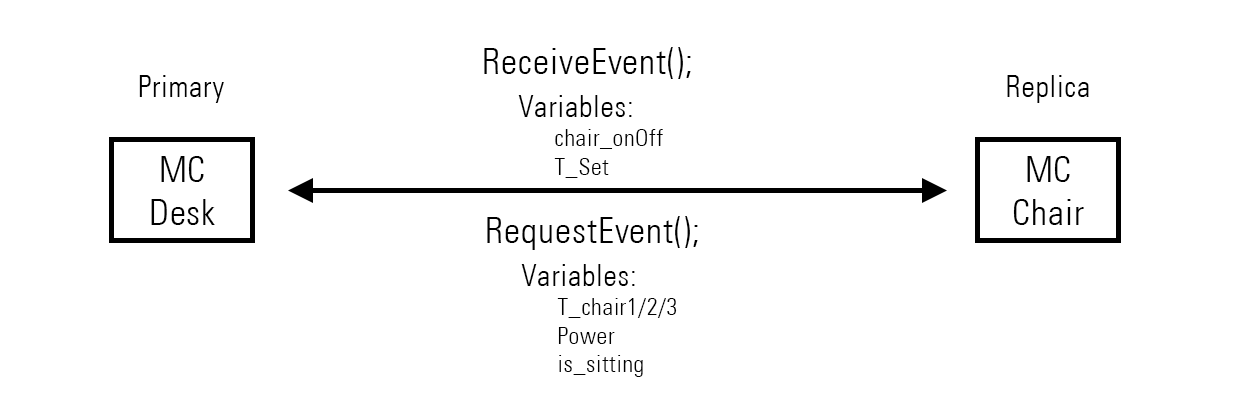
<style>
.page{position:relative;width:1249px;height:405px;background:#ffffff}
.page>*{position:absolute;margin:0}
.t1{font:24px "UniversLT-CondensedLight";letter-spacing:0.025em;color:#000000}
.t2{font:36px "UniversLT-CondensedLight";letter-spacing:0.025em;color:#000000}
.t3{font:30px "UniversLT-CondensedLight";letter-spacing:0.025em;color:#000000}
</style>
<div class="page">
<p class="t1" style="left:484px;top:47px;width:207px;height:131px"><span class="t2">ReceiveEvent();<br></span><span class="t3"> Variables: <br></span>  chair_onOff<br>  T_Set</p>
<p class="t3" style="left:139px;top:75px;width:85px;height:28px">Primary</p>
<p class="t3" style="left:1007px;top:75px;width:82px;height:28px">Replica</p>
<p class="t2" style="left:151px;top:156px;width:64px;height:69px;text-align:center">MC<br>Desk</p>
<p class="t2" style="left:1013px;top:156px;width:71px;height:69px;text-align:center">MC<br>Chair</p>
<p class="t1" style="left:487px;top:216px;width:211px;height:161px"><span class="t2">RequestEvent();<br></span><span class="t3"> Variables: <br></span>  T_chair1/2/3<br>  Power<br>  is_sitting</p>
</div>
